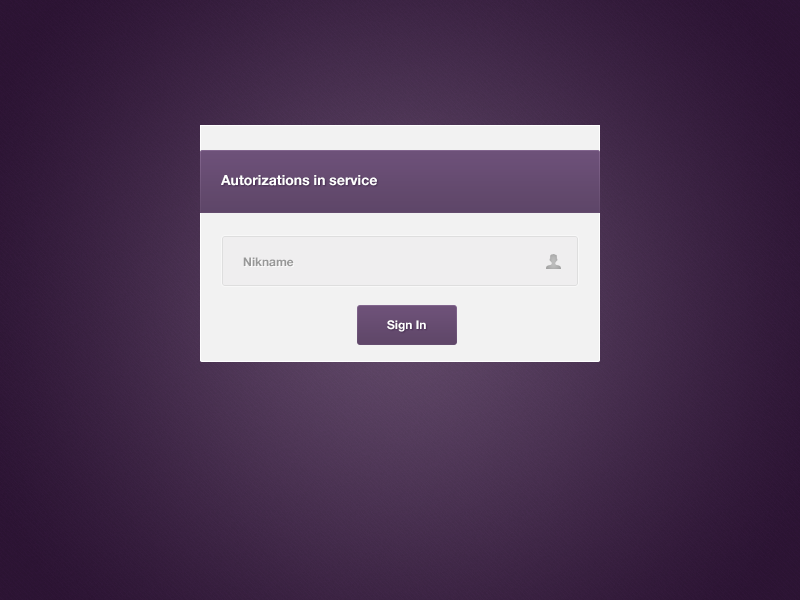
<style>
.page{position:relative;width:800px;height:600px}
.page>*{position:absolute;margin:0}
.t1{font:14px "HelveticaNeue-Bold";color:#ffffff}
.t2{font:12px "HelveticaNeue-Bold";color:#989898}
.t3{font:12px "HelveticaNeue-Bold";color:#ffffff}
</style>
<div class="page">
<p class="t1" style="left:221px;top:175px;width:156px;height:11px">Autorizations in service</p>
<p class="t2" style="left:243px;top:257px;width:51px;height:10px">Nikname</p>
<p class="t3" style="left:387px;top:320px;width:39px;height:12px">Sign In</p>
</div>
